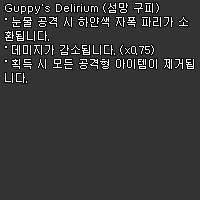
<style>
.page{position:relative;width:200px;height:200px;background:#333333}
.page>*{position:absolute;margin:0}
.t1{font:11px/14px "Dotum";color:#ffffff}
</style>
<div class="page">
<p class="t1" style="left:5px;top:3px;width:189px;height:80px">Guppy's Delirium (섬망 구피)<br>˚ 눈물 공격 시 하얀색 자폭 파리가 소<br>환됩니다.<br>˚ 데미지가 감소됩니다. (x0.75)<br>˚ 획득 시 모든 공격형 아이템이 제거됩<br>니다.</p>
</div>
